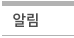
<style>
.page{position:relative;width:74px;height:38px;background:#ffffff}
.page>*{position:absolute;margin:0}
.t1{font:15px "MalgunGothicBold";letter-spacing:-0.05em;color:#4e4e4e;scale:0.95 1}
</style>
<div class="page">
<p class="t1" style="left:13px;top:13px;width:25px;height:14px">알림</p>
</div>
